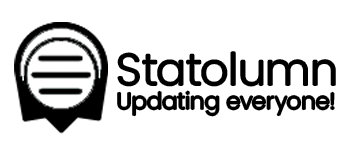
<style>
.page{position:relative;width:350px;height:155px;background:#ffffff}
.page>*{position:absolute;margin:0}
.t1{font:44.4px "Poppins-Light";color:#000000}
.t2{font:22.9px "Poppins-Light";color:#000000}
</style>
<div class="page">
<p class="t1" style="left:118px;top:52px;width:217px;height:34px">Statolumn</p>
<p class="t2" style="left:118px;top:91px;width:216px;height:25px">Updating everyone!</p>
</div>
